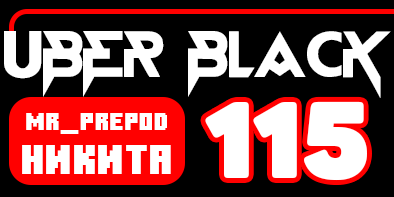
<style>
.page{position:relative;width:394px;height:197px;background:#000000}
.page>*{position:absolute;margin:0}
.t1{font:65.3px "BlackStarFJNTBYLYAJKA";color:#ffffff;text-transform:uppercase}
.t2{font:106.9px "Panton-ExtraBlack";color:#ffffff;text-transform:uppercase}
.t3{font:25px "MinecraftTen";color:#ffffff;text-transform:uppercase}
.t4{font:41.7px "MinecraftTen";color:#ffffff;text-transform:uppercase}
</style>
<div class="page">
<p class="t1" style="left:4px;top:31px;width:387px;height:67px">UBER BLACK</p>
<p class="t2" style="left:205px;top:101px;width:162px;height:80px">115</p>
<p class="t3" style="left:26px;top:113px;width:141px;height:21px">Mr_Prepod</p>
<p class="t4" style="left:22px;top:145px;width:149px;height:29px">Никита</p>
</div>
